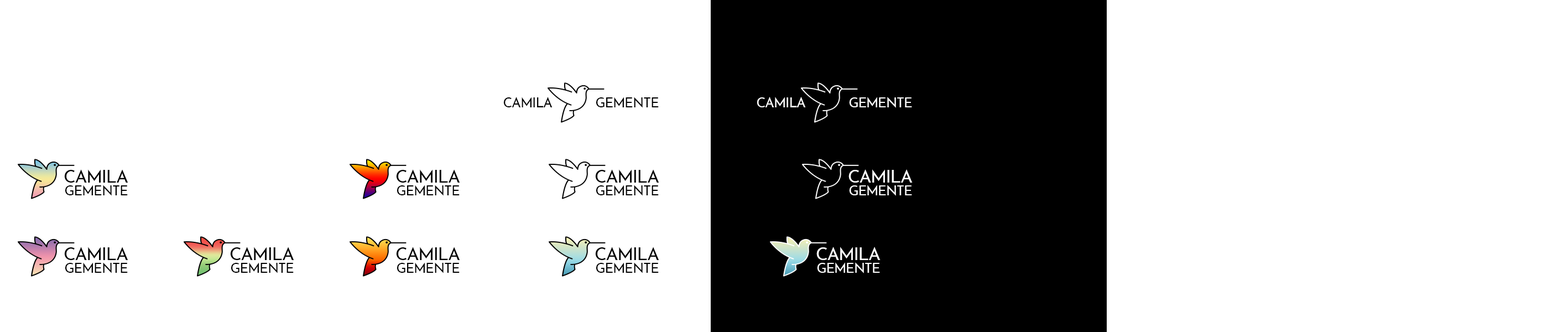
<style>
.page{position:relative;width:1568px;height:332px;background:#ffffff}
.page>*{position:absolute;margin:0}
.t1{font:13.4px "JosefinSans-Regular";letter-spacing:-0.05em;color:#000000;text-transform:uppercase}
.t2{font:13.4px "JosefinSans-Regular";letter-spacing:-0.05em;color:#ffffff;text-transform:uppercase}
.t3{font:17.6px "JosefinSans-Regular";letter-spacing:-0.05em;color:#000000;text-transform:uppercase}
.t4{font:17.6px "JosefinSans-Regular";letter-spacing:-0.05em;color:#ffffff;text-transform:uppercase}
</style>
<div class="page">
<p class="t1" style="left:503px;top:97px;width:50px;height:10px">Camila</p>
<p class="t1" style="left:596px;top:97px;width:63px;height:11px">Gemente</p>
<p class="t2" style="left:757px;top:97px;width:49px;height:10px">Camila</p>
<p class="t2" style="left:849px;top:97px;width:63px;height:11px">Gemente</p>
<p class="t3" style="left:64px;top:169px;width:64px;height:14px">Camila</p>
<p class="t3" style="left:396px;top:169px;width:64px;height:14px">Camila</p>
<p class="t3" style="left:595px;top:169px;width:64px;height:14px">Camila</p>
<p class="t4" style="left:848px;top:169px;width:65px;height:14px">Camila</p>
<p class="t1" style="left:65px;top:185px;width:63px;height:11px">Gemente</p>
<p class="t1" style="left:397px;top:185px;width:63px;height:11px">Gemente</p>
<p class="t1" style="left:596px;top:185px;width:63px;height:11px">Gemente</p>
<p class="t2" style="left:849px;top:185px;width:63px;height:11px">Gemente</p>
<p class="t3" style="left:64px;top:247px;width:64px;height:13px">Camila</p>
<p class="t3" style="left:230px;top:247px;width:64px;height:13px">Camila</p>
<p class="t3" style="left:396px;top:247px;width:64px;height:13px">Camila</p>
<p class="t3" style="left:595px;top:247px;width:64px;height:13px">Camila</p>
<p class="t4" style="left:816px;top:247px;width:65px;height:13px">Camila</p>
<p class="t1" style="left:65px;top:262px;width:63px;height:11px">Gemente</p>
<p class="t1" style="left:231px;top:262px;width:63px;height:11px">Gemente</p>
<p class="t1" style="left:397px;top:262px;width:63px;height:11px">Gemente</p>
<p class="t1" style="left:596px;top:262px;width:63px;height:11px">Gemente</p>
<p class="t2" style="left:817px;top:262px;width:63px;height:11px">Gemente</p>
</div>
